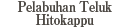
<style>
.page{position:relative;width:130px;height:27px;background:#ffffff}
.page>*{position:absolute;margin:0}
.t1{font:14px/13px "RyuminPro-ExBold";letter-spacing:-0.04em;color:#4c4843;scale:0.9 1}
</style>
<div class="page">
<p class="t1" style="left:17px;top:1px;width:95px;height:26px;text-align:center">Pelabuhan Teluk<br>Hitokappu</p>
</div>
